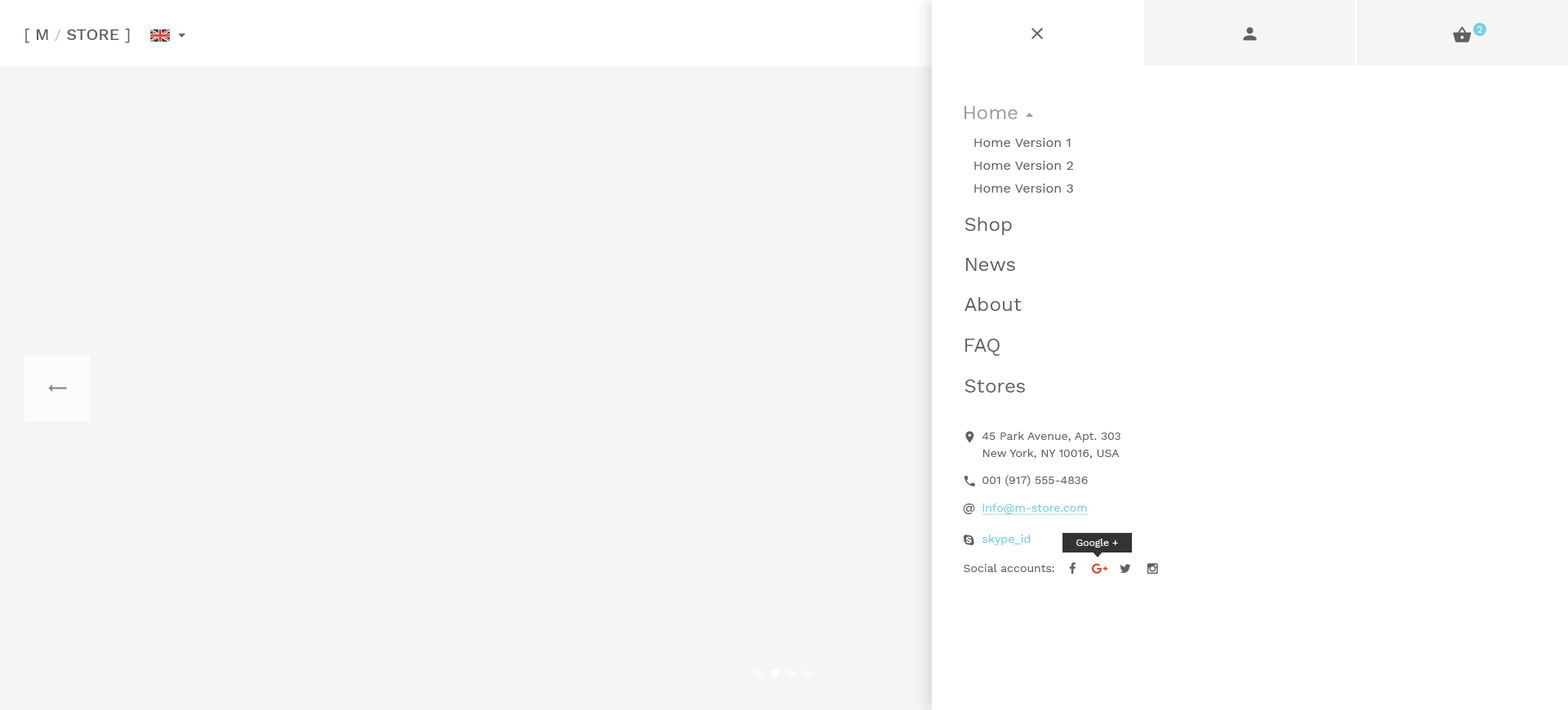
<style>
.page{position:relative;width:1568px;height:710px;background:#f5f5f5}
.page>*{position:absolute;margin:0}
.t1{font:16.3px "WorkSans-Medium";color:#606060}
.t2{font:16.3px "WorkSans-Regular";color:#606060}
.t3{font:14.7px "WorkSans-Regular";color:#bababa}
.t4{font:9.8px "WorkSans-Regular";color:#fffefe}
.t5{font:19.6px "WorkSans-Regular";color:#999999}
.t6{font:13.1px/22.9px "WorkSans-Regular";color:#606060}
.t7{font:19.6px "WorkSans-Regular";color:#606060}
.t8{font:11.4px/17.1px "WorkSans-Regular";color:#606060}
.t9{font:11.4px "WorkSans-Regular";color:#606060}
.t10{font:13.1px "WorkSans-Medium";color:#606060}
.t11{font:11.4px "WorkSans-Regular";color:#77cde3;text-decoration:underline}
.t12{font:11.4px "WorkSans-Regular";color:#77cde3}
.t13{font:9.8px "WorkSans-Regular";color:#ffffff}
</style>
<div class="page">
<p class="t1" style="left:25px;top:29px;width:105px;height:14px"><span class="t2">[</span> M <span class="t3">/ </span>STORE <span class="t2">]</span></p>
<p class="t4" style="left:1477px;top:26px;width:5px;height:7px">2</p>
<p class="t5" style="left:964px;top:106px;width:54px;height:13px">Home</p>
<p class="t6" style="left:974px;top:138px;width:99px;height:55px">Home Version 1<br>Home Version 2<br>Home Version 3</p>
<p class="t7" style="left:964px;top:217px;width:48px;height:18px">Shop</p>
<p class="t7" style="left:966px;top:258px;width:49px;height:13px">News</p>
<p class="t7" style="left:964px;top:297px;width:58px;height:14px">About</p>
<p class="t7" style="left:965px;top:339px;width:35px;height:17px">FAQ</p>
<p class="t7" style="left:964px;top:380px;width:61px;height:13px">Stores</p>
<p class="t8" style="left:982px;top:432px;width:138px;height:27px">45 Park Avenue, Apt. 303<br>New York, NY 10016, USA</p>
<p class="t9" style="left:982px;top:475px;width:106px;height:12px">001 (917) 555-4836</p>
<p class="t10" style="left:963px;top:504px;width:12px;height:10px">@</p>
<p class="t11" style="left:982px;top:504px;width:106px;height:11px">info@m-store.com</p>
<p class="t12" style="left:982px;top:535px;width:49px;height:11px">skype_id</p>
<p class="t13" style="left:1076px;top:539px;width:42px;height:9px">Google +</p>
<p class="t9" style="left:964px;top:564px;width:90px;height:8px">Social accounts:</p>
</div>
